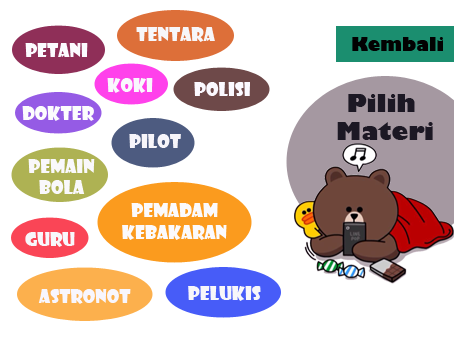
<style>
.page{position:relative;width:454px;height:340px;background:#ffffff}
.page>*{position:absolute;margin:0}
.t1{font:18px "ShowcardGothic-Reg";color:#f7f6f9}
.t2{font:18px "GillSans-UltraBold";color:#020202}
.t3{font:18px "ShowcardGothic-Reg";color:#fcfbff}
.t4{font:18px "ShowcardGothic-Reg";color:#f9f7fd}
.t5{font:18px "ShowcardGothic-Reg";color:#fbf9ff}
.t6{font:24px "GillSans-UltraBold";color:#1c1824}
.t7{font:18px "ShowcardGothic-Reg";color:#fcfcfd}
.t8{font:18px "ShowcardGothic-Reg";color:#f7f5fa}
.t9{font:18px "ShowcardGothic-Reg";color:#f9f8fb}
.t10{font:18px "ShowcardGothic-Reg";color:#fbfafc}
.t11{font:18px "ShowcardGothic-Reg";color:#f8f7fb}
.t12{font:18px "ShowcardGothic-Reg";color:#f8f6fd}
.t13{font:18px "ShowcardGothic-Reg";color:#f7f6fa}
</style>
<div class="page">
<p class="t1" style="left:136px;top:27px;width:79px;height:15px">tentara</p>
<p class="t2" style="left:352px;top:37px;width:91px;height:14px">Kembali</p>
<p class="t3" style="left:25px;top:43px;width:63px;height:14px">petani</p>
<p class="t4" style="left:107px;top:78px;width:46px;height:15px">Koki</p>
<p class="t5" style="left:194px;top:82px;width:56px;height:14px">polisi</p>
<p class="t6" style="left:337px;top:94px;width:96px;height:46px;text-align:center">Pilih <br>Materi</p>
<p class="t7" style="left:22px;top:106px;width:72px;height:15px">Dokter</p>
<p class="t8" style="left:129px;top:134px;width:52px;height:14px">pilot</p>
<p class="t9" style="left:28px;top:159px;width:67px;height:35px;text-align:center">pemain<br>bola</p>
<p class="t10" style="left:122px;top:203px;width:105px;height:37px;text-align:center">pemadam<br>kebakaran</p>
<p class="t11" style="left:25px;top:232px;width:50px;height:15px">guru</p>
<p class="t12" style="left:38px;top:289px;width:93px;height:15px">astronot</p>
<p class="t13" style="left:188px;top:286px;width:73px;height:15px">pelukis</p>
</div>
